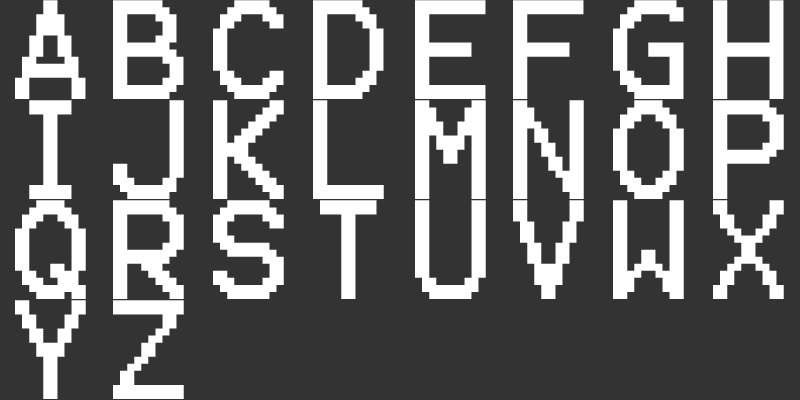
<style>
.page{position:relative;width:800px;height:400px;background:#333333}
.page>*{position:absolute;margin:0}
.t1{font:112.9px "Terminal";color:#ffffff}
.t2{font:112.7px "Terminal";color:#ffffff}
</style>
<div class="page">
<p class="t1" style="left:15px;top:0px;width:71px;height:99px">A</p>
<p class="t1" style="left:113px;top:0px;width:71px;height:99px">B</p>
<p class="t1" style="left:213px;top:0px;width:71px;height:99px">C</p>
<p class="t1" style="left:313px;top:0px;width:71px;height:99px">D</p>
<p class="t1" style="left:415px;top:0px;width:71px;height:99px">E</p>
<p class="t1" style="left:513px;top:0px;width:71px;height:99px">F</p>
<p class="t1" style="left:613px;top:0px;width:71px;height:99px">G</p>
<p class="t1" style="left:713px;top:0px;width:71px;height:99px">H</p>
<p class="t2" style="left:29px;top:100px;width:43px;height:99px">I</p>
<p class="t2" style="left:113px;top:100px;width:71px;height:99px">J</p>
<p class="t2" style="left:213px;top:100px;width:71px;height:99px">K</p>
<p class="t2" style="left:313px;top:100px;width:71px;height:99px">L</p>
<p class="t2" style="left:415px;top:100px;width:71px;height:99px">M</p>
<p class="t2" style="left:513px;top:100px;width:71px;height:99px">N</p>
<p class="t2" style="left:613px;top:100px;width:71px;height:99px">O</p>
<p class="t2" style="left:713px;top:100px;width:71px;height:99px">P</p>
<p class="t2" style="left:15px;top:200px;width:71px;height:99px">Q</p>
<p class="t2" style="left:113px;top:200px;width:71px;height:99px">R</p>
<p class="t2" style="left:213px;top:200px;width:71px;height:99px">S</p>
<p class="t2" style="left:320px;top:200px;width:57px;height:99px">T</p>
<p class="t2" style="left:415px;top:200px;width:71px;height:99px">U</p>
<p class="t2" style="left:513px;top:200px;width:71px;height:99px">V</p>
<p class="t2" style="left:613px;top:200px;width:71px;height:99px">W</p>
<p class="t2" style="left:713px;top:200px;width:71px;height:99px">X</p>
<p class="t2" style="left:15px;top:300px;width:71px;height:99px">Y</p>
<p class="t2" style="left:113px;top:300px;width:71px;height:99px">Z</p>
</div>
